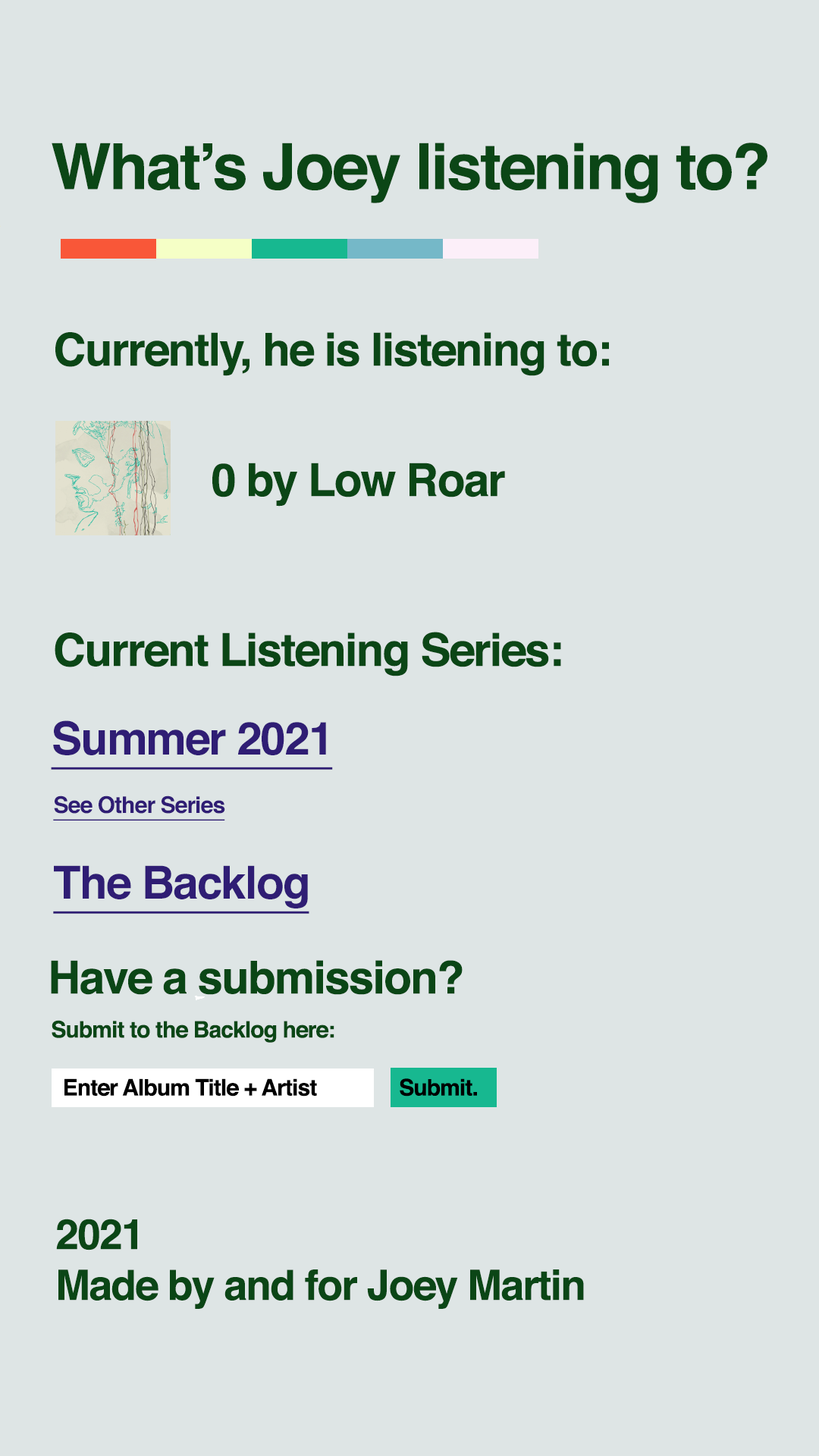
<style>
.page{position:relative;width:819px;height:1456px;background:#dee5e5}
.page>*{position:absolute;margin:0}
.t1{font:63.7px "Helvetica-Bold";letter-spacing:-0.03em;color:#0b4616}
.t2{font:45.5px "Helvetica-Bold";letter-spacing:-0.03em;color:#0b4616}
.t3{font:45.5px "Helvetica-Bold";letter-spacing:-0.03em;color:#2f1d74;text-decoration:underline}
.t4{font:22.7px "Helvetica-Bold";letter-spacing:-0.03em;color:#2f1d74;text-decoration:underline}
.t5{font:22.7px "Helvetica-Bold";letter-spacing:-0.03em;color:#0b4616}
.t6{font:22.7px "Helvetica-Bold";letter-spacing:-0.03em;color:#000000}
.t7{font:41.7px/50.8px "Helvetica-Bold";letter-spacing:-0.03em;color:#0b4616}
</style>
<div class="page">
<p class="t1" style="left:52px;top:143px;width:715px;height:60px">What’s Joey listening to?</p>
<p class="t2" style="left:55px;top:332px;width:554px;height:44px">Currently, he is listening to:</p>
<p class="t2" style="left:212px;top:463px;width:293px;height:44px">0 by Low Roar</p>
<p class="t2" style="left:55px;top:632px;width:506px;height:44px">Current Listening Series:</p>
<p class="t3" style="left:51px;top:720px;width:282px;height:50px">Summer 2021</p>
<p class="t4" style="left:53px;top:795px;width:172px;height:26px">See Other Series</p>
<p class="t3" style="left:53px;top:865px;width:256px;height:49px">The Backlog</p>
<p class="t2" style="left:51px;top:960px;width:412px;height:35px">Have a submission?</p>
<p class="t5" style="left:52px;top:1020px;width:282px;height:23px">Submit to the Backlog here:</p>
<p class="t6" style="left:64px;top:1078px;width:253px;height:19px">Enter Album Title + Artist</p>
<p class="t6" style="left:400px;top:1078px;width:77px;height:19px">Submit.</p>
<p class="t7" style="left:56px;top:1219px;width:528px;height:90px">2021<br>Made by and for Joey Martin</p>
</div>
